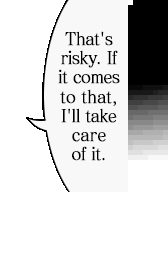
<style>
.page{position:relative;width:168px;height:256px;background:#ffffff}
.page>*{position:absolute;margin:0}
.t1{font:17.6px "MatissePro-M";letter-spacing:-0.05em;color:#000000;font-weight:bold;scale:0.91 1}
.t2{font:17.6px "MatissePro-M";letter-spacing:-0.025em;color:#000000;font-weight:bold;scale:0.91 1}
.t3{font:17.6px/19px "MatissePro-M";letter-spacing:-0.01em;color:#000000;font-weight:bold;scale:0.91 1}
</style>
<div class="page">
<p class="t1" style="left:58px;top:31px;width:62px;height:130px;text-align:center">That's<br>risky. If<br>it comes<br><span class="t2">to that</span>,<br>I'll take<br><span class="t3">care<br></span>of it.</p>
</div>
